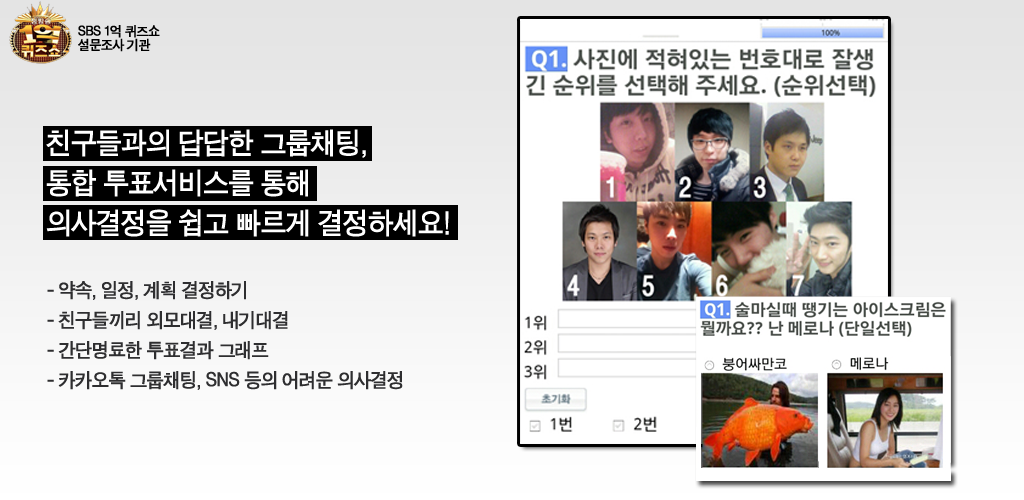
<style>
.page{position:relative;width:1024px;height:500px}
.page>*{position:absolute;margin:0}
.t1{font:13.8px/6.9px "SandTg";letter-spacing:-0.05em;color:#000000;font-weight:bold;scale:0.95 1}
.t2{font:30px/10px "SandTg";letter-spacing:-0.05em;color:#ffffff;font-weight:bold;scale:0.95 1}
.t3{font:20px/15px "SandTg";letter-spacing:-0.05em;color:#2e2e30;font-weight:bold;scale:0.95 1}
</style>
<div class="page">
<p class="t1" style="left:78px;top:25px;width:82px;height:27px">SBS 1억 퀴즈쇼<br><br>설문조사 기관</p>
<p class="t2" style="left:46px;top:129px;width:403px;height:108px">친구들과의 답답한 그룹채팅,<br><br><br><br>통합 투표서비스를 통해<br><br><br>        <br>의사결정을 쉽고 빠르게 결정하세요!</p>
<p class="t3" style="left:47px;top:281px;width:356px;height:109px">- 약속, 일정, 계획 결정하기<br><br>- 친구들끼리 외모대결, 내기대결<br><br>- 간단명료한 투표결과 그래프<br><br>- 카카오톡 그룹채팅, SNS 등의 어려운 의사결정</p>
</div>
